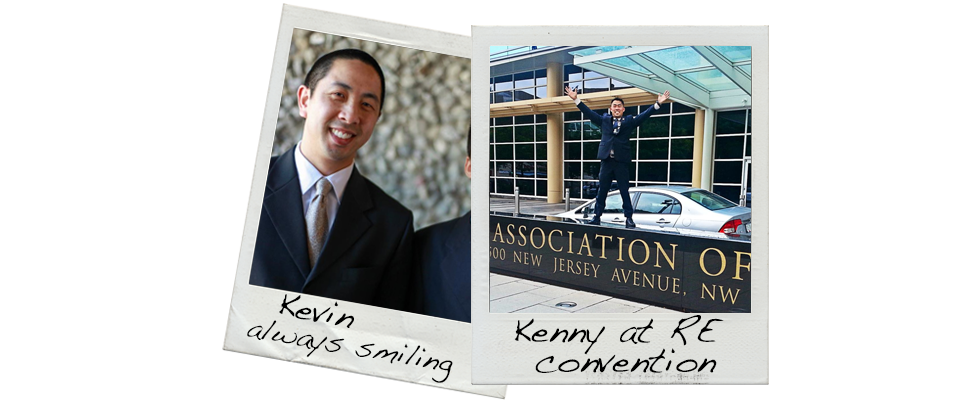
<style>
.page{position:relative;width:980px;height:400px;background:#ffffff}
.page>*{position:absolute;margin:0}
.t1{font:35.2px "Handwriting-Dakota";color:#000000}
.t2{font:36px "Handwriting-Dakota";color:#000000}
.t3{font:30px "Handwriting-Dakota";color:#000000}
</style>
<div class="page">
<p class="t1" style="left:279px;top:294px;width:75px;height:34px;rotate:10deg">Kevin</p>
<p class="t2" style="left:514px;top:315px;width:210px;height:40px">Kenny at RE</p>
<p class="t3" style="left:247px;top:320px;width:206px;height:63px;rotate:10deg">always smiling</p>
<p class="t2" style="left:535px;top:348px;width:182px;height:25px">convention</p>
</div>
